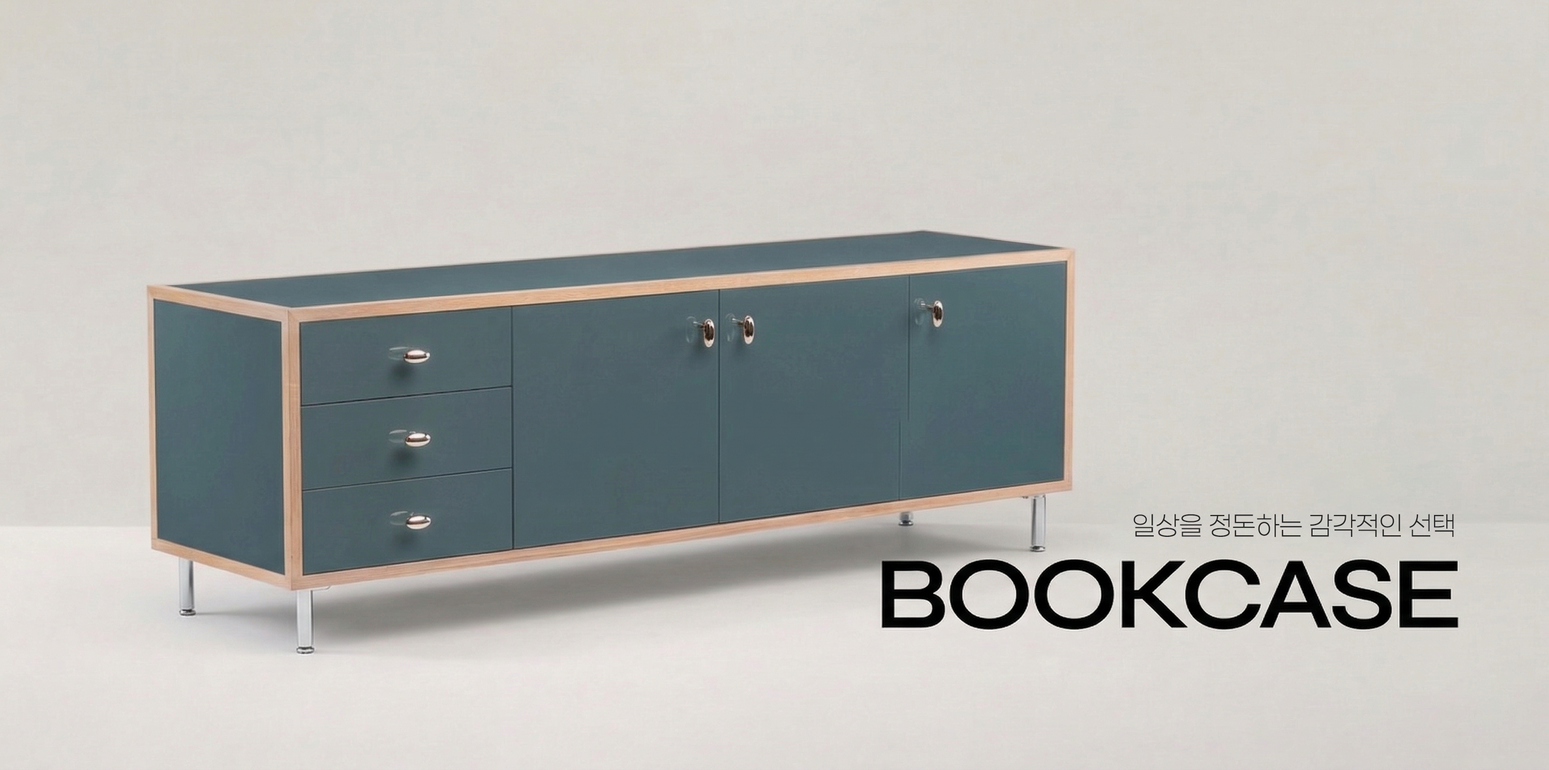
<style>
.page{position:relative;width:1549px;height:770px}
.page>*{position:absolute;margin:0}
.t1{font:26.7px "Paperlogy-2ExtraLight";color:#242424}
</style>
<div class="page">
<p class="t1" style="left:1133px;top:514px;width:320px;height:23px">일상을 정돈하는 감각적인 선택</p>
</div>
